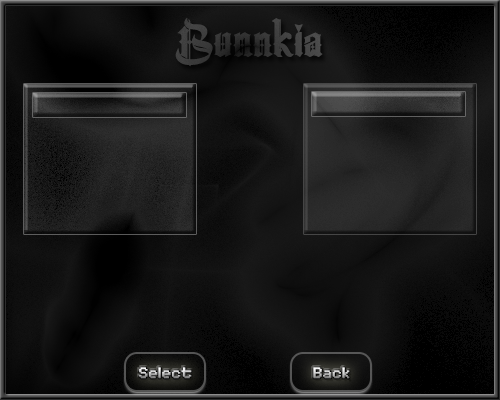
<style>
.page{position:relative;width:500px;height:400px}
.page>*{position:absolute;margin:0}
.t1{font:48px "TheCenturion";color:#3d3d3d;font-weight:bold}
.t2{font:24px "MinimalFont5x7";font-weight:bold}
</style>
<div class="page">
<p class="t1" style="left:175px;top:18px;width:148px;height:49px">Bunnkia</p>
<p class="t2" style="left:139px;top:367px;width:53px;height:12px">Select</p>
<p class="t2" style="left:313px;top:367px;width:37px;height:12px">Back</p>
</div>
